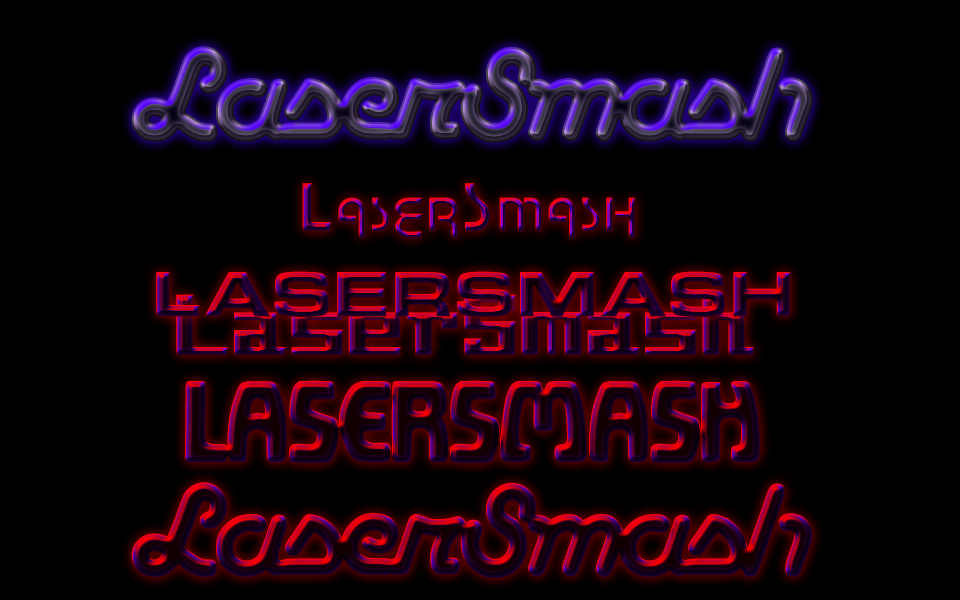
<style>
.page{position:relative;width:960px;height:600px;background:#000000}
.page>*{position:absolute;margin:0}
.t1{font:125.6px "BoaScript";letter-spacing:-0.1em}
.t2{font:75.6px "Motter-Tektura";font-variant:small-caps}
.t3{font:75.6px "MetrostyleExtended-Bold";text-transform:uppercase}
.t4{font:75.6px "Intellect";letter-spacing:-0.14em}
.t5{font:102px "Imagica";letter-spacing:-0.02em}
</style>
<div class="page">
<p class="t1" style="left:131px;top:46px;width:682px;height:97px">LaserSmash</p>
<p class="t2" style="left:302px;top:183px;width:334px;height:56px">LaserSmash</p>
<p class="t3" style="left:156px;top:271px;width:635px;height:46px">LaserSmash</p>
<p class="t4" style="left:176px;top:294px;width:578px;height:62px">LaserSmash</p>
<p class="t5" style="left:184px;top:380px;width:577px;height:84px">LaserSmash</p>
<p class="t1" style="left:131px;top:482px;width:682px;height:97px">LaserSmash</p>
</div>
